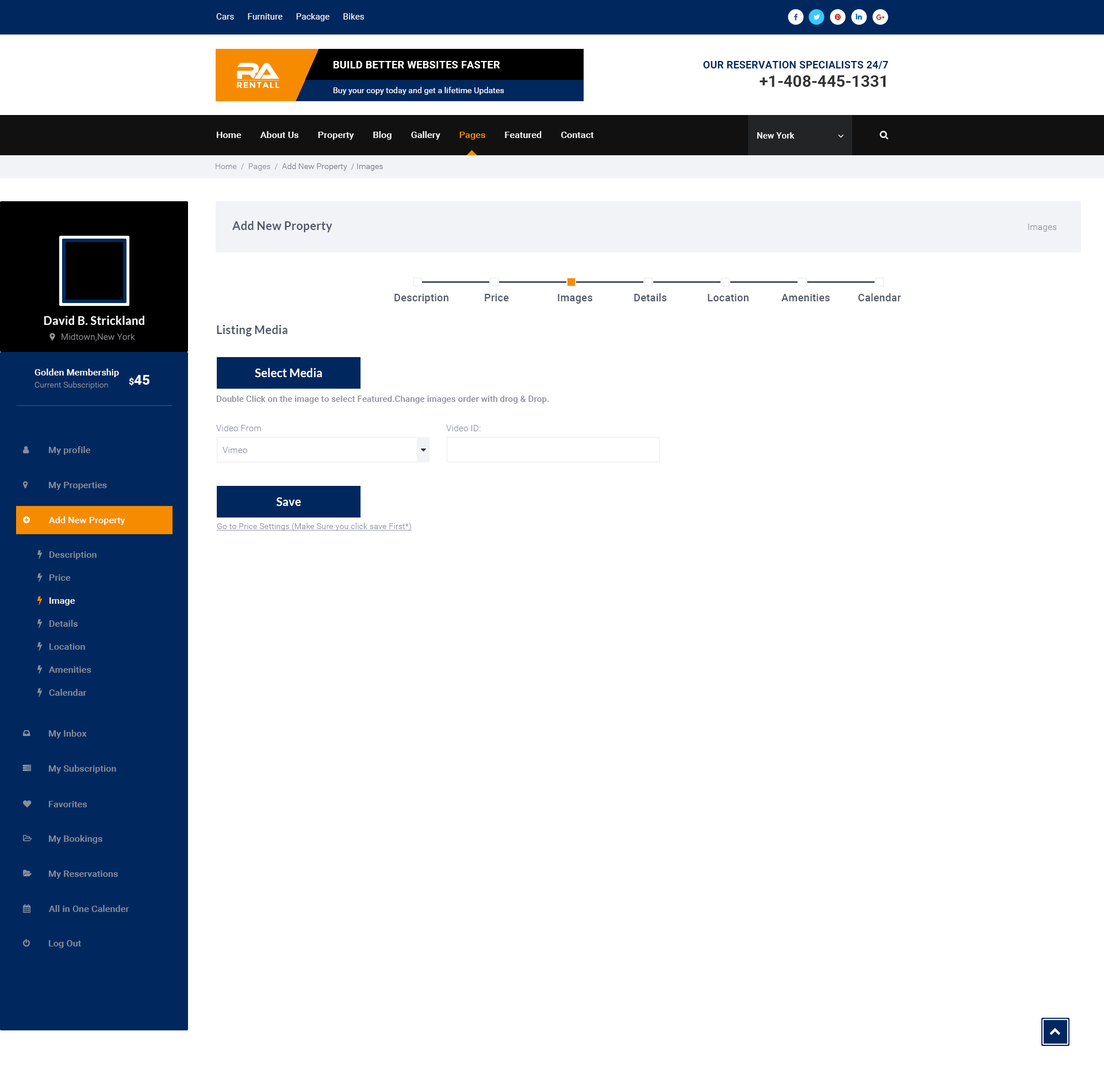
<style>
.page{position:relative;width:1104px;height:1081px;background:#ffffff}
.page>*{position:absolute;margin:0}
.t1{font:8.6px "Roboto-Regular";letter-spacing:0.01em;color:#ffffff}
.t2{font:10.3px "Roboto-Bold";letter-spacing:0.02em;color:#ffffff;text-transform:uppercase}
.t3{font:10.3px "Roboto-Bold";letter-spacing:0.01em;color:#00285f;text-transform:uppercase}
.t4{font:16.1px "Roboto-Bold";color:#333333}
.t5{font:8.4px "Montserrat-Bold";letter-spacing:0.08em;color:#ffffff;text-transform:uppercase}
.t6{font:8px "Roboto-Regular";letter-spacing:0.01em;color:#ffffff}
.t7{font:9.2px "Roboto-Medium";letter-spacing:0.01em;color:#ffffff}
.t8{font:9.2px "Roboto-Medium";letter-spacing:0.01em;color:#f78b00}
.t9{font:8.6px "Roboto-Medium";letter-spacing:0.01em;color:#ffffff}
.t10{font:8px "Roboto-Light";letter-spacing:0.01em;color:#757983}
.t11{font:8px "Roboto-Light";letter-spacing:0.01em;color:#8a8f9a}
.t12{font:11.5px "Lato-Bold";letter-spacing:0.01em;color:#4d5567}
.t13{font:8.6px "Roboto-Light";letter-spacing:0.01em;color:#8a8f9a}
.t14{font:10.3px "Roboto-Medium";letter-spacing:0.01em;color:#4d5567}
.t15{font:11.5px "Lato-Bold";letter-spacing:0.01em;color:#ffffff}
.t16{font:13.8px "Roboto-Bold";letter-spacing:0.01em;color:#ffffff}
.t17{font:9.2px "Roboto-Bold";letter-spacing:0.01em;color:#ffffff}
.t18{font:8.6px "Roboto-Medium";letter-spacing:0.01em;color:#8a8f9a}
.t19{font:9.2px "Roboto-Medium";letter-spacing:0.01em;color:#8a8f9a}
.t20{font:8px "Roboto-Light";letter-spacing:0.01em;color:#8a8f9a;text-decoration:underline}
.t21{font:9.2px/23px "Roboto-Medium";letter-spacing:0.01em;color:#8a8f9a}
.t22{font:9.2px/23px "Roboto-Medium";letter-spacing:0.01em;color:#ffffff}
</style>
<div class="page">
<p class="t1" style="left:216px;top:13px;width:148px;height:8px">Cars      Furniture      Package      Bikes</p>
<p class="t2" style="left:333px;top:61px;width:167px;height:7px">Build better Websites Faster</p>
<p class="t3" style="left:703px;top:61px;width:185px;height:8px">Our Reservation Specialists 24/7</p>
<p class="t4" style="left:759px;top:75px;width:126px;height:12px">+1-408-445-1331</p>
<p class="t5" style="left:237px;top:82px;width:42px;height:6px">RentAll</p>
<p class="t6" style="left:333px;top:87px;width:171px;height:8px">Buy your copy today and get a lifetime Updates</p>
<p class="t7" style="left:217px;top:131px;width:377px;height:9px">Home        About Us        Property        Blog        Gallery        <span class="t8">Pages</span>        Featured        Contact</p>
<p class="t9" style="left:757px;top:132px;width:37px;height:7px">New York</p>
<p class="t10" style="left:216px;top:163px;width:167px;height:8px"><span class="t11">Home  /  Pages  /  </span>Add New Property  / Images</p>
<p class="t12" style="left:232px;top:221px;width:100px;height:11px">Add New Property</p>
<p class="t13" style="left:1028px;top:224px;width:28px;height:8px">Images</p>
<p class="t14" style="left:394px;top:294px;width:54px;height:9px">Description</p>
<p class="t14" style="left:485px;top:294px;width:24px;height:7px">Price</p>
<p class="t14" style="left:558px;top:294px;width:34px;height:9px">Images</p>
<p class="t14" style="left:634px;top:293px;width:32px;height:8px">Details</p>
<p class="t14" style="left:708px;top:294px;width:40px;height:7px">Location</p>
<p class="t14" style="left:781px;top:294px;width:48px;height:7px">Amenities</p>
<p class="t14" style="left:858px;top:293px;width:43px;height:8px">Calendar</p>
<p class="t15" style="left:44px;top:316px;width:100px;height:9px">David B. Strickland</p>
<p class="t12" style="left:217px;top:325px;width:70px;height:11px">Listing Media</p>
<p class="t13" style="left:61px;top:333px;width:74px;height:8px">Midtown,New York</p>
<p class="t7" style="left:34px;top:368px;width:85px;height:9px">Golden Membership</p>
<p class="t16" style="left:129px;top:375px;width:20px;height:11px"><span class="t17">$</span>45</p>
<p class="t15" style="left:255px;top:368px;width:67px;height:9px">Select Media</p>
<p class="t11" style="left:34px;top:381px;width:74px;height:8px">Current Subscription</p>
<p class="t18" style="left:217px;top:395px;width:332px;height:8px">Double Click on the image to select Featured.Change images order with drog &amp; Drop.</p>
<p class="t13" style="left:216px;top:425px;width:45px;height:6px">Video From</p>
<p class="t13" style="left:446px;top:425px;width:35px;height:6px">Video ID:</p>
<p class="t19" style="left:49px;top:446px;width:41px;height:9px">My profile</p>
<p class="t13" style="left:222px;top:447px;width:25px;height:6px">Vimeo</p>
<p class="t19" style="left:49px;top:482px;width:58px;height:8px">My Properties</p>
<p class="t15" style="left:276px;top:497px;width:25px;height:9px">Save</p>
<p class="t7" style="left:49px;top:516px;width:76px;height:9px">Add New Property</p>
<p class="t20" style="left:217px;top:522px;width:195px;height:9px">Go to Price Settings (Make Sure you click save First*)</p>
<p class="t21" style="left:49px;top:551px;width:48px;height:144px">Description<br>Price<br><span class="t22">Image<br></span>Details<br>Location<br>Amenities<br>Calendar</p>
<p class="t19" style="left:49px;top:729px;width:38px;height:9px">My Inbox</p>
<p class="t19" style="left:49px;top:764px;width:67px;height:9px">My Subscription</p>
<p class="t19" style="left:49px;top:801px;width:38px;height:6px">Favorites</p>
<p class="t19" style="left:49px;top:835px;width:53px;height:8px">My Bookings</p>
<p class="t19" style="left:49px;top:870px;width:69px;height:8px">My Reservations</p>
<p class="t19" style="left:49px;top:905px;width:80px;height:7px">All in One Calender</p>
<p class="t19" style="left:49px;top:940px;width:32px;height:8px">Log Out</p>
</div>
